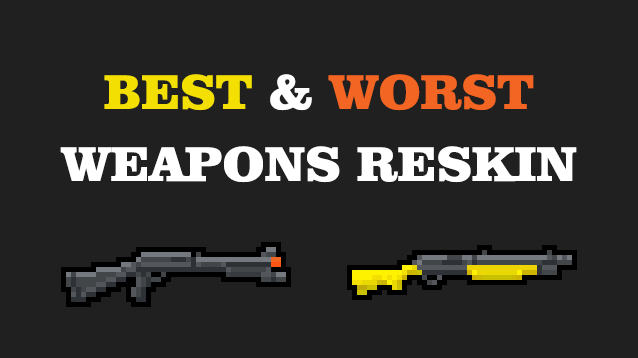
<style>
.page{position:relative;width:638px;height:358px;background:#202020}
.page>*{position:absolute;margin:0}
.t1{font:50px/72px "ClarendonBT-Black";color:#ffffff}
.t2{font:50px/72px "ClarendonBT-Black";color:#f3e002}
.t3{font:50px/72px "ClarendonBT-Black";color:#f26522}
</style>
<div class="page">
<p class="t1" style="left:60px;top:74px;width:517px;height:109px;text-align:center"><span class="t2">BEST</span> &amp; <span class="t3">WORST<br></span>WEAPONS RESKIN</p>
</div>
